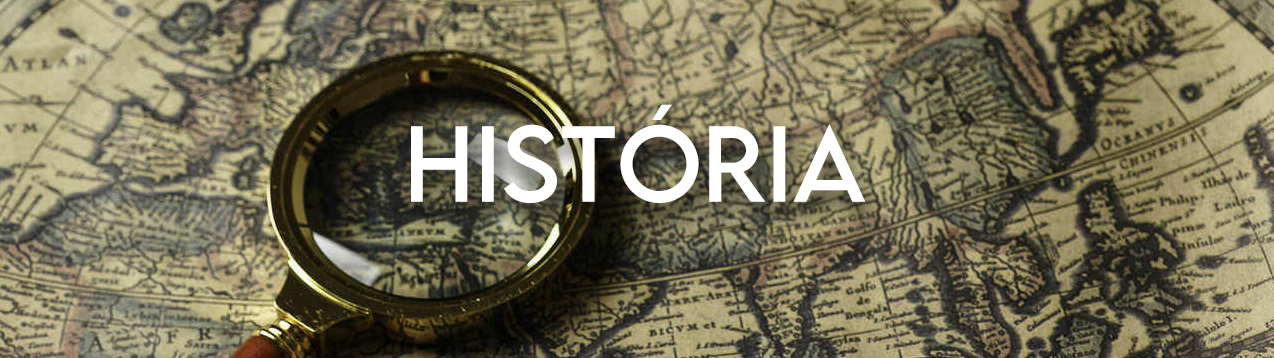
<style>
.page{position:relative;width:1274px;height:358px}
.page>*{position:absolute;margin:0}
.t1{font:96px "LEMONMILK-Regular";color:#ffffff}
</style>
<div class="page">
<p class="t1" style="left:411px;top:104px;width:455px;height:99px">História</p>
</div>
